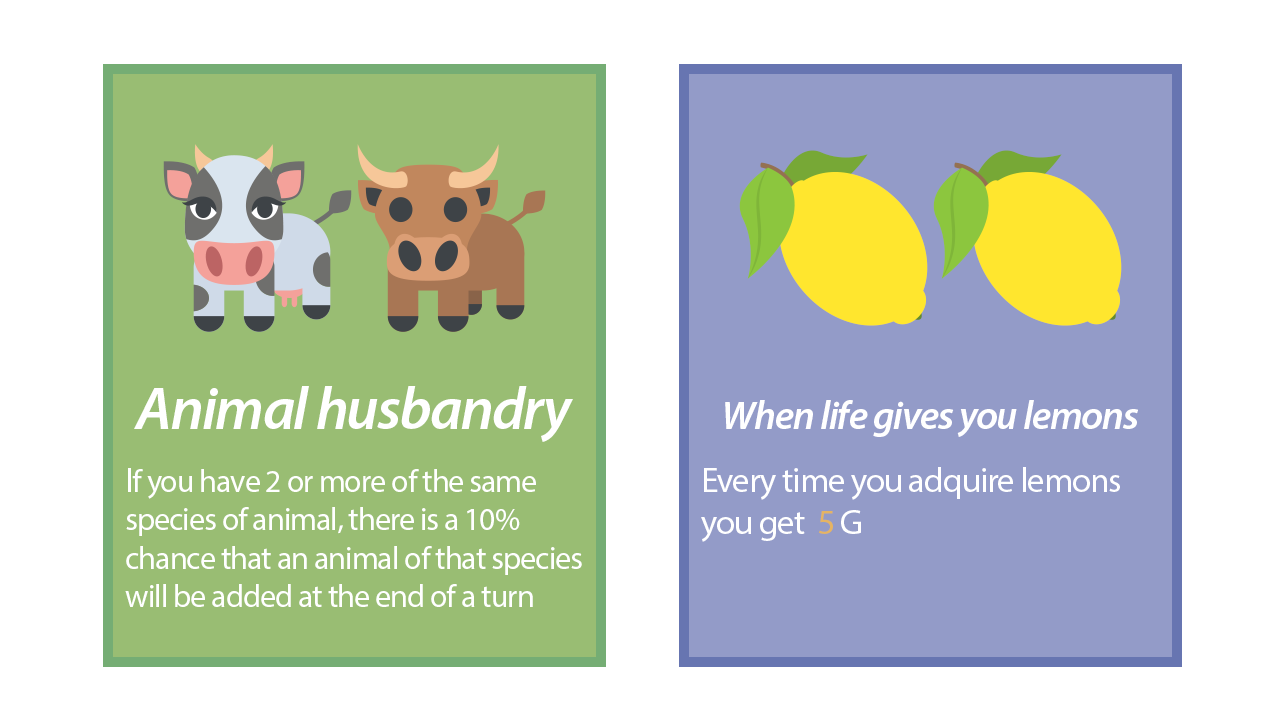
<style>
.page{position:relative;width:1280px;height:720px;background:#ffffff}
.page>*{position:absolute;margin:0}
.t1{font:60px "MyriadPro-SemiboldIt";letter-spacing:-0.03em;color:#ffffff}
.t2{font:40px "MyriadPro-SemiboldIt";letter-spacing:-0.03em;color:#ffffff}
.t3{font:32px "MyriadPro-Regular";letter-spacing:-0.03em;color:#ffffff}
.t4{font:35px "MyriadPro-Regular";letter-spacing:-0.03em;color:#ffffff}
.t5{font:35px "MyriadPro-Regular";letter-spacing:-0.03em;color:#e5b463}
</style>
<div class="page">
<p class="t1" style="left:134px;top:386px;width:439px;height:56px">Animal husbandry</p>
<p class="t2" style="left:725px;top:400px;width:413px;height:37px">When life gives you lemons</p>
<p class="t3" style="left:125px;top:468px;width:457px;height:139px"><span class="t4">I</span>f you have 2 or more of the same <br>species of animal, there is a 10% <br>chance that an animal of that species<br>will be added at the end of a turn</p>
<p class="t4" style="left:701px;top:467px;width:419px;height:75px">Every time you adquire lemons<br>you get  <span class="t5">5 </span>G</p>
</div>
